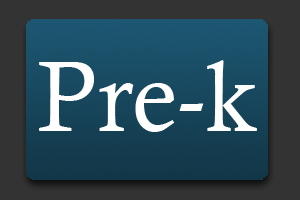
<style>
.page{position:relative;width:300px;height:200px;background:#333333}
.page>*{position:absolute;margin:0}
.t1{font:98.1px "CalistoMT";color:#ffffff}
</style>
<div class="page">
<p class="t1" style="left:39px;top:60px;width:218px;height:72px">Pre-k</p>
</div>
